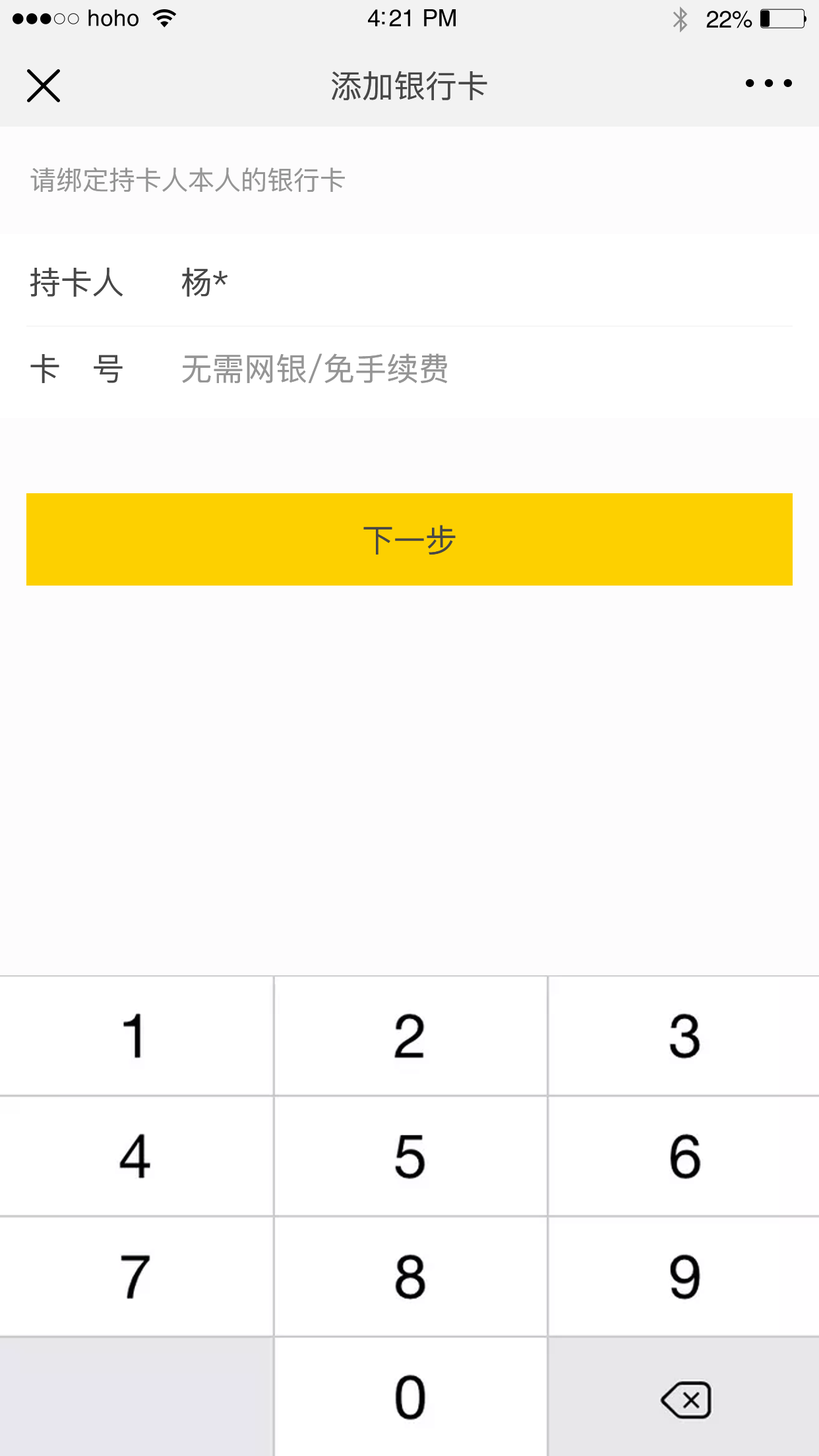
<style>
.page{position:relative;width:819px;height:1456px;background:#fdfcfd}
.page>*{position:absolute;margin:0}
.t1{font:22.8px "Helvetica";letter-spacing:0.02em;color:#000000}
.t2{font:23.8px "Helvetica";letter-spacing:-0.02em;color:#000000}
.t3{font:31.7px "PingFang-SC-Medium";color:#474747}
.t4{font:26.4px "PingFang-SC-Medium";color:#959595}
.t5{font:31.7px "PingFang-SC-Medium";color:#959595}
</style>
<div class="page">
<p class="t1" style="left:88px;top:9px;width:50px;height:17px">hoho</p>
<p class="t2" style="left:368px;top:9px;width:88px;height:17px">4:21 PM</p>
<p class="t2" style="left:706px;top:11px;width:46px;height:17px">22%</p>
<p class="t3" style="left:332px;top:71px;width:155px;height:29px">添加银行卡</p>
<p class="t4" style="left:30px;top:167px;width:315px;height:25px">请绑定持卡人本人的银行卡</p>
<p class="t3" style="left:30px;top:267px;width:93px;height:30px">持卡人</p>
<p class="t3" style="left:182px;top:267px;width:45px;height:30px">杨*</p>
<p class="t5" style="left:182px;top:353px;width:266px;height:30px">无需网银/免手续费</p>
<p class="t3" style="left:30px;top:354px;width:93px;height:29px">卡   号</p>
<p class="t3" style="left:363px;top:525px;width:93px;height:30px">下一步</p>
</div>
